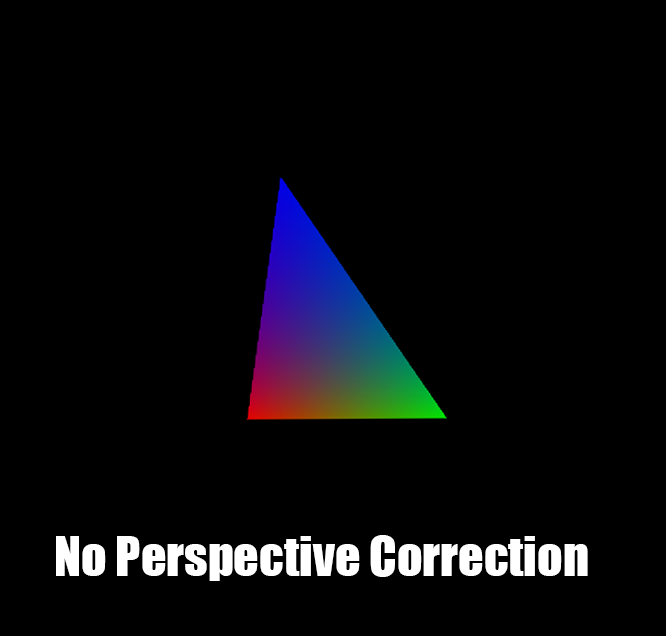
<style>
.page{position:relative;width:666px;height:636px;background:#000000}
.page>*{position:absolute;margin:0}
.t1{font:50px "Impact";color:#ffffff}
</style>
<div class="page">
<p class="t1" style="left:56px;top:535px;width:532px;height:46px">No Perspective Correction</p>
</div>
